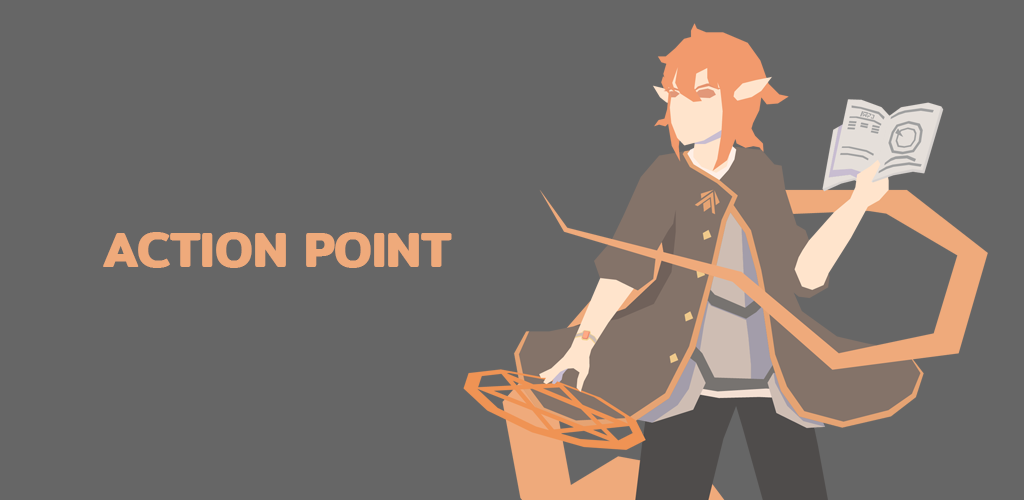
<style>
.page{position:relative;width:1024px;height:500px;background:#666666}
.page>*{position:absolute;margin:0}
.t1{font:50px "Mitr-SemiBold";color:#efaa7b}
</style>
<div class="page">
<p class="t1" style="left:103px;top:232px;width:349px;height:36px">ACTION POINT</p>
</div>
